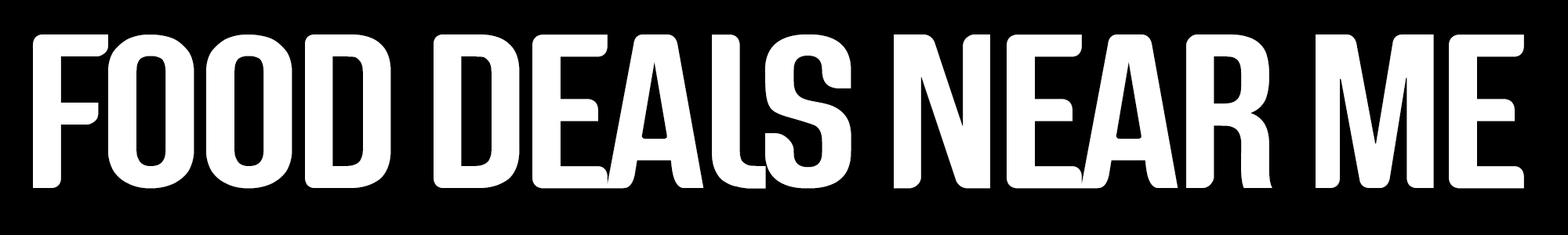
<style>
.page{position:relative;width:1568px;height:235px;background:#000000}
.page>*{position:absolute;margin:0}
.t1{font:219.5px "GenghisKhan-";letter-spacing:-0.05em;color:#ffffff}
</style>
<div class="page">
<p class="t1" style="left:32px;top:34px;width:1492px;height:155px">FOOD DEALS NEAR ME</p>
</div>
